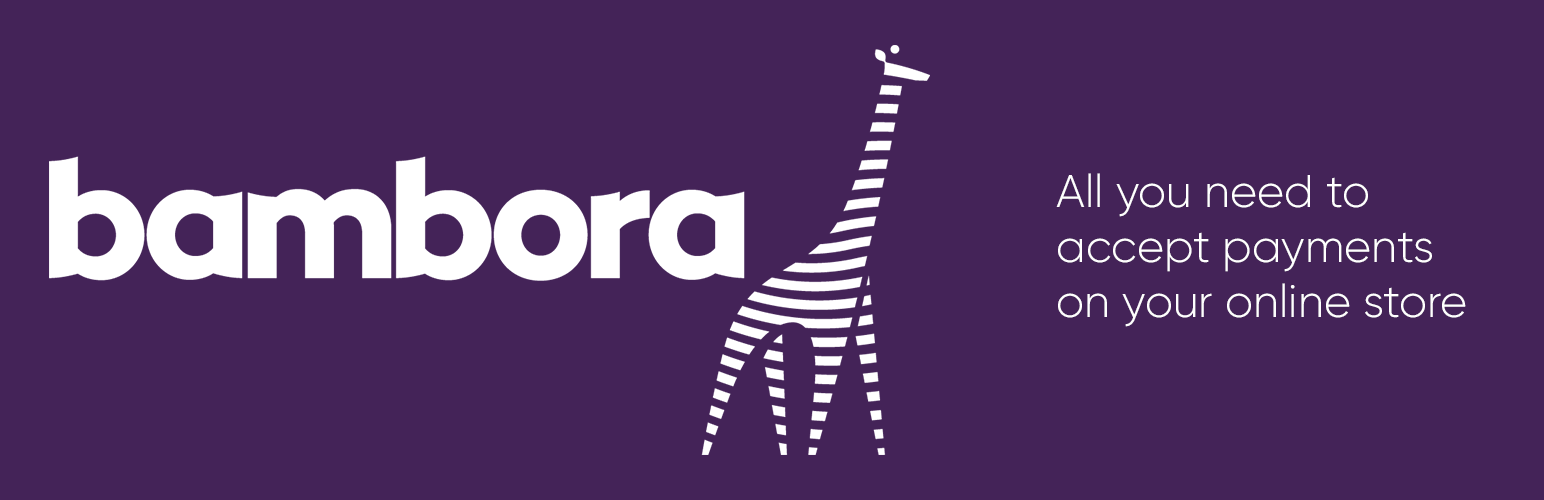
<style>
.page{position:relative;width:1544px;height:500px;background:#442358}
.page>*{position:absolute;margin:0}
.t1{font:45.8px "Gilroy-Light";color:#ffffff}
</style>
<div class="page">
<p class="t1" style="left:1056px;top:173px;width:410px;height:154px">All you need to accept payments<br>on your online store</p>
</div>
